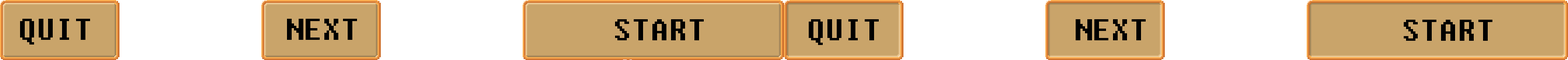
<style>
.page{position:relative;width:1568px;height:60px;background:#c9a46a}
.page>*{position:absolute;margin:0}
.t1{font:29.9px "Fixedsys";color:#000000}
</style>
<div class="page">
<p class="t1" style="left:20px;top:19px;width:70px;height:25px">QUIT</p>
<p class="t1" style="left:287px;top:19px;width:70px;height:21px">NEXT</p>
<p class="t1" style="left:615px;top:19px;width:89px;height:21px">START</p>
<p class="t1" style="left:809px;top:19px;width:70px;height:26px">QUIT</p>
<p class="t1" style="left:1076px;top:19px;width:70px;height:21px">NEXT</p>
<p class="t1" style="left:1404px;top:20px;width:88px;height:21px">START</p>
</div>
